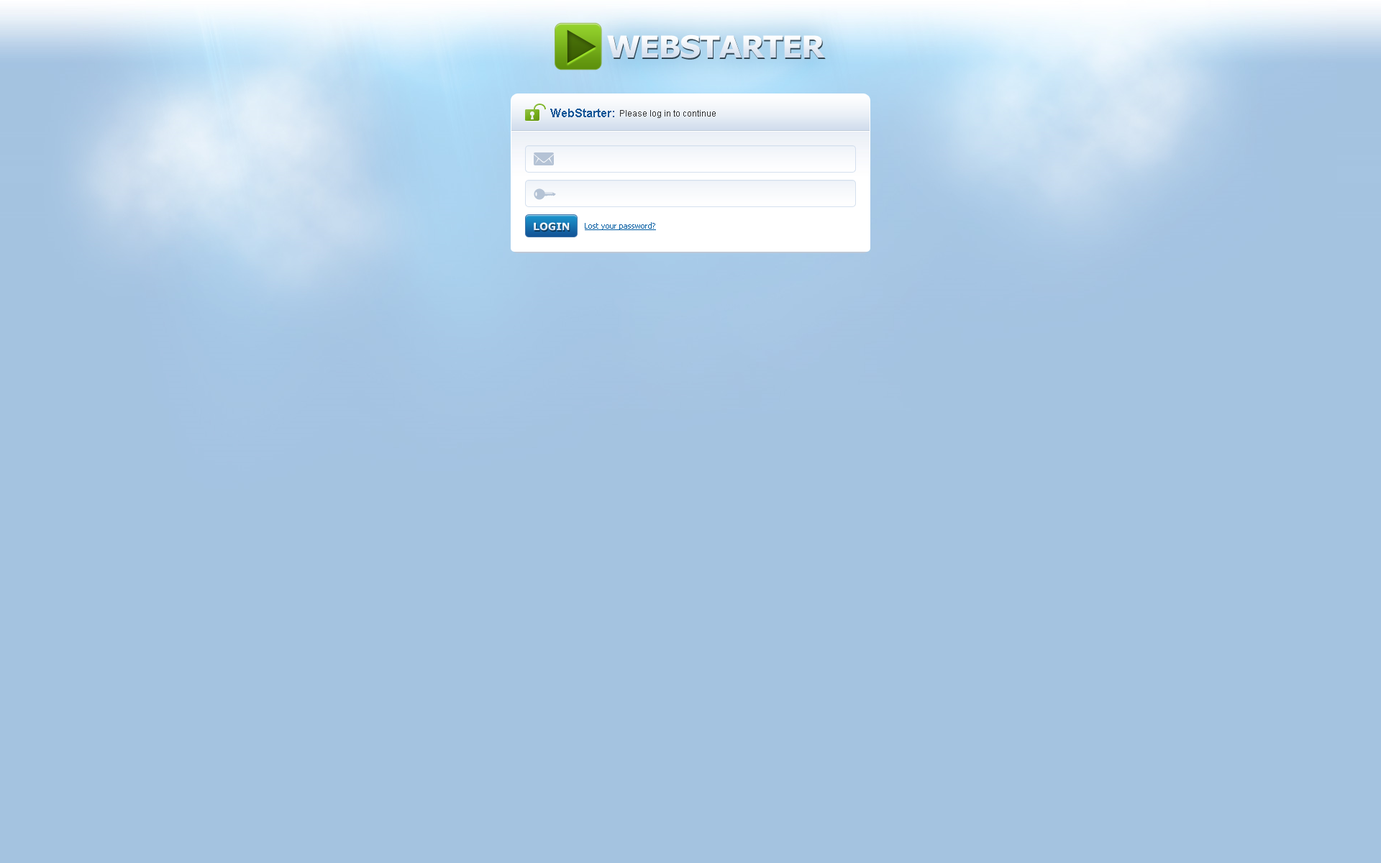
<style>
.page{position:relative;width:1381px;height:863px;background:#a4c3e0}
.page>*{position:absolute;margin:0}
.t1{font:30.2px "Verdana-Bold";letter-spacing:-0.05em;color:#e9eff6;text-transform:uppercase}
.t2{font:11.5px "Arial-BoldMT";color:#115496}
.t3{font:8.6px "ArialMT";color:#333333}
.t4{font:10.1px "Verdana-Bold";color:#e7edf5;text-transform:uppercase}
.t5{font:7.9px "Tahoma";color:#005ca2;text-decoration:underline}
</style>
<div class="page">
<p class="t1" style="left:607px;top:35px;width:218px;height:23px">WebStarter</p>
<p class="t2" style="left:550px;top:109px;width:64px;height:8px">WebStarter:</p>
<p class="t3" style="left:620px;top:110px;width:96px;height:8px">Please log in to continue</p>
<p class="t4" style="left:534px;top:222px;width:36px;height:9px">LOGIN</p>
<p class="t5" style="left:585px;top:222px;width:71px;height:8px">Lost your password?</p>
</div>
